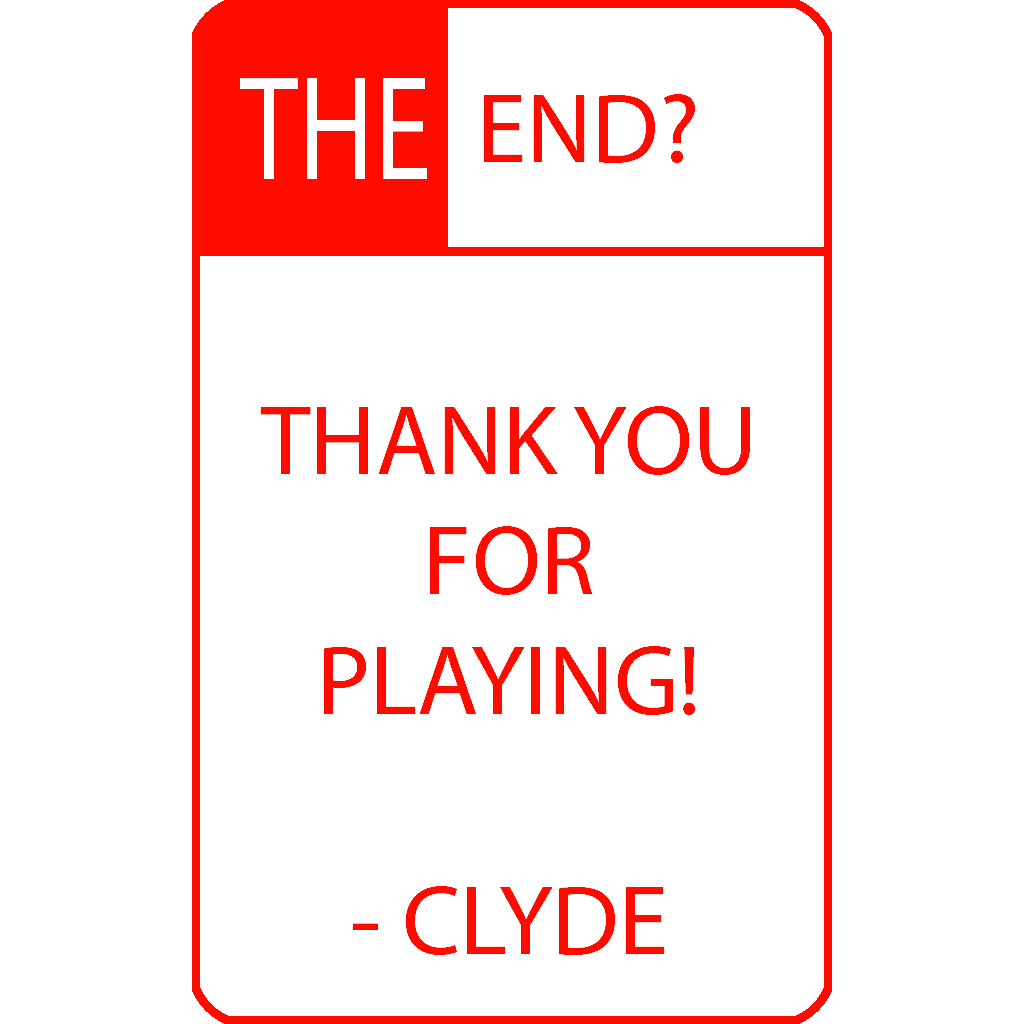
<style>
.page{position:relative;width:1024px;height:1024px;background:#ffffff}
.page>*{position:absolute;margin:0}
.t1{font:150px "MyriadPro-Regular";color:#ffffff;scale:0.78 1}
.t2{font:100px "MyriadPro-Regular";color:#ff0c00}
</style>
<div class="page">
<p class="t1" style="left:240px;top:77px;width:188px;height:102px">THE</p>
<p class="t2" style="left:484px;top:94px;width:211px;height:69px">END?</p>
<p class="t2" style="left:260px;top:406px;width:490px;height:549px;text-align:center">THANK YOU<br>FOR<br>PLAYING!<br><br>- CLYDE</p>
</div>
